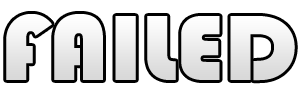
<style>
.page{position:relative;width:300px;height:100px;background:#ffffff}
.page>*{position:absolute;margin:0}
.t1{font:95.6px "Bauhaus93";color:#ebebeb;scale:1.05 1}
</style>
<div class="page">
<p class="t1" style="left:6px;top:14px;width:289px;height:67px">FAILED</p>
</div>
